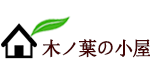
<style>
.page{position:relative;width:150px;height:70px;background:#ffffff}
.page>*{position:absolute;margin:0}
.t1{font:19px "SimSun";letter-spacing:-0.075em;color:#430606;font-weight:bold}
</style>
<div class="page">
<p class="t1" style="left:42px;top:39px;width:109px;height:19px">木ノ葉の小屋</p>
</div>
